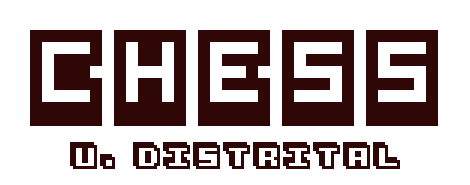
<style>
.page{position:relative;width:470px;height:185px;background:#ffffff}
.page>*{position:absolute;margin:0}
.t1{font:96px "Pixel-Bit-Advanced";color:#300707}
.t2{font:48px "3Dventure";color:#300707}
</style>
<div class="page">
<p class="t1" style="left:30px;top:30px;width:408px;height:96px">CHESS</p>
<p class="t2" style="left:70px;top:142px;width:330px;height:27px">U. distrital</p>
</div>
